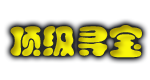
<style>
.page{position:relative;width:150px;height:80px;background:#ffffff}
.page>*{position:absolute;margin:0}
.t1{font:33.4px "Jpangtouyu"}
</style>
<div class="page">
<p class="t1" style="left:10px;top:25px;width:132px;height:33px">顶级寻宝</p>
</div>
